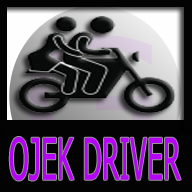
<style>
.page{position:relative;width:192px;height:192px;background:#030303}
.page>*{position:absolute;margin:0}
.t1{font:57.4px "Tahoma";color:#b603f8;font-weight:bold;scale:0.47 1}
</style>
<div class="page">
<p class="t1" style="left:9px;top:137px;width:172px;height:44px">OJEK DRIVER</p>
</div>
